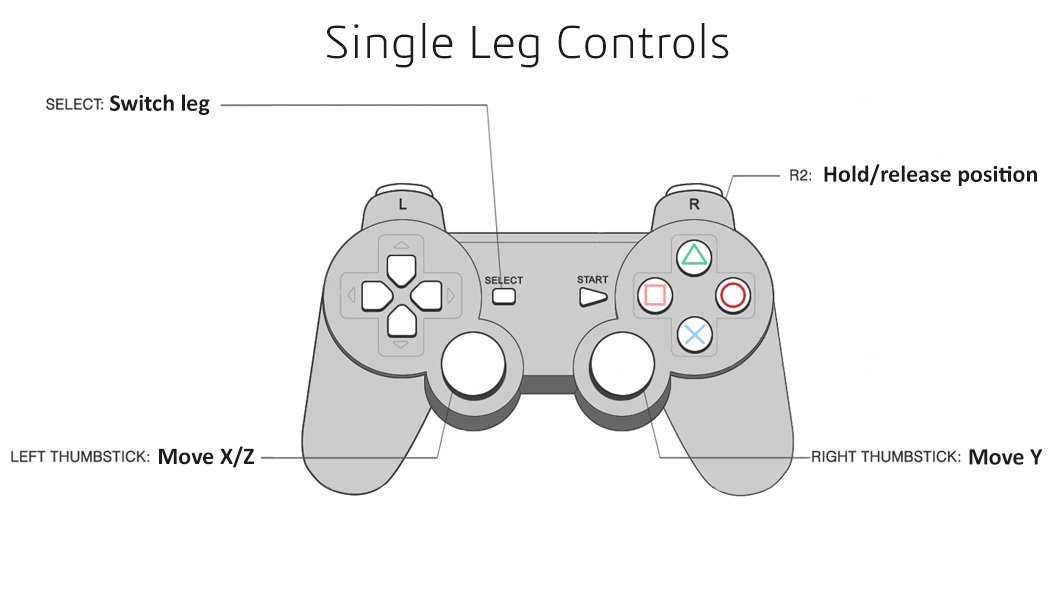
<style>
.page{position:relative;width:1056px;height:594px;background:#ffffff}
.page>*{position:absolute;margin:0}
.t1{font:48px "3ds-Light";color:#1b1b1b}
.t2{font:24px "Calibri-Bold";color:#1b1b1b}
</style>
<div class="page">
<p class="t1" style="left:327px;top:23px;width:402px;height:45px">Single Leg Controls</p>
<p class="t2" style="left:110px;top:94px;width:100px;height:21px">Switch leg</p>
<p class="t2" style="left:824px;top:164px;width:213px;height:22px">Hold/release position</p>
<p class="t2" style="left:159px;top:446px;width:95px;height:22px">Move X/Z</p>
<p class="t2" style="left:969px;top:449px;width:74px;height:16px">Move Y</p>
</div>
